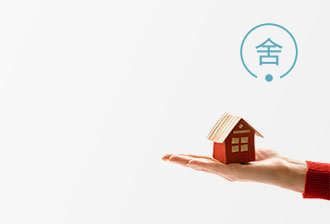
<style>
.page{position:relative;width:330px;height:224px}
.page>*{position:absolute;margin:0}
.t1{font:30px "SourceHanSansCN-Regular";color:#5dabc0}
</style>
<div class="page">
<p class="t1" style="left:255px;top:37px;width:28px;height:29px">舍</p>
</div>
